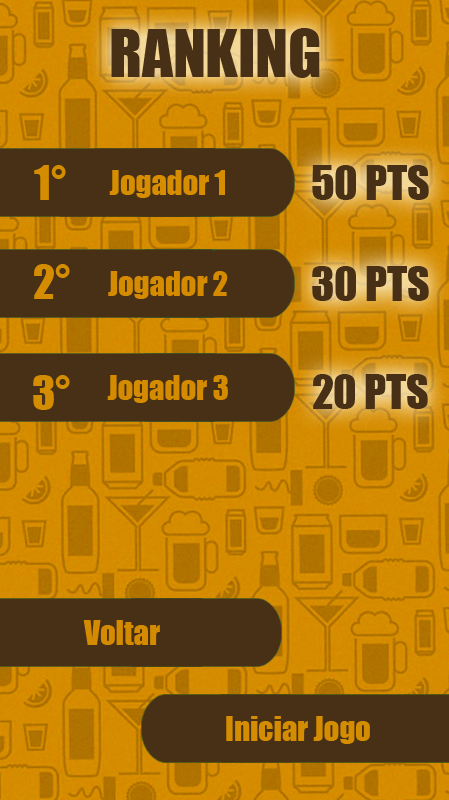
<style>
.page{position:relative;width:449px;height:800px;background:#473015}
.page>*{position:absolute;margin:0}
.t1{font:60.7px "Impact";color:#473015}
.t2{font:43.6px "Impact";color:#d48d00}
.t3{font:30.6px "Impact";color:#d68d00}
.t4{font:43.6px "Impact";color:#473015}
.t5{font:30.6px "Impact";color:#d58b00}
.t6{font:30.6px "Impact";color:#d48d00}
</style>
<div class="page">
<p class="t1" style="left:111px;top:28px;width:209px;height:50px">RANKING</p>
<p class="t2" style="left:34px;top:165px;width:32px;height:35px">1°</p>
<p class="t3" style="left:109px;top:170px;width:116px;height:28px">Jogador 1</p>
<p class="t4" style="left:312px;top:165px;width:117px;height:35px">50 PTS</p>
<p class="t2" style="left:34px;top:264px;width:36px;height:35px">2°</p>
<p class="t4" style="left:312px;top:266px;width:117px;height:35px">30 PTS</p>
<p class="t5" style="left:108px;top:271px;width:120px;height:28px">Jogador 2</p>
<p class="t2" style="left:33px;top:375px;width:37px;height:35px">3°</p>
<p class="t5" style="left:107px;top:375px;width:121px;height:28px">Jogador 3</p>
<p class="t4" style="left:313px;top:374px;width:115px;height:35px">20 PTS</p>
<p class="t5" style="left:83px;top:620px;width:77px;height:25px">Voltar</p>
<p class="t6" style="left:226px;top:716px;width:144px;height:28px">Iniciar Jogo</p>
</div>
